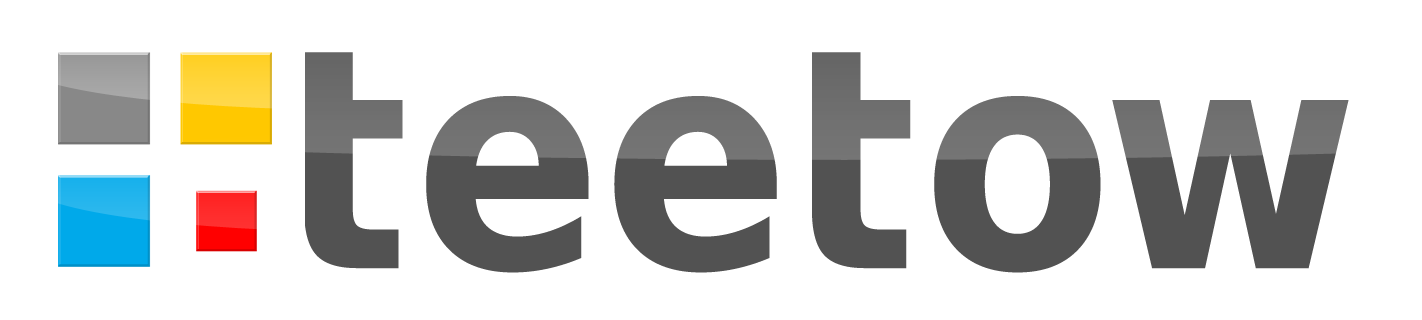
<style>
.page{position:relative;width:1422px;height:320px;background:#ffffff}
.page>*{position:absolute;margin:0}
.t1{font:307px "DejaVuSansCondensed-Bold";color:#525252}
</style>
<div class="page">
<p class="t1" style="left:280px;top:52px;width:1069px;height:221px">teetow</p>
</div>
